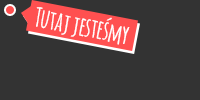
<style>
.page{position:relative;width:200px;height:100px;background:#333333}
.page>*{position:absolute;margin:0}
.t1{font:26.2px "Amatic-Bold";color:#ffffff}
</style>
<div class="page">
<p class="t1" style="left:36px;top:7px;width:94px;height:38px;rotate:11deg">Tutaj jesteśmy</p>
</div>
